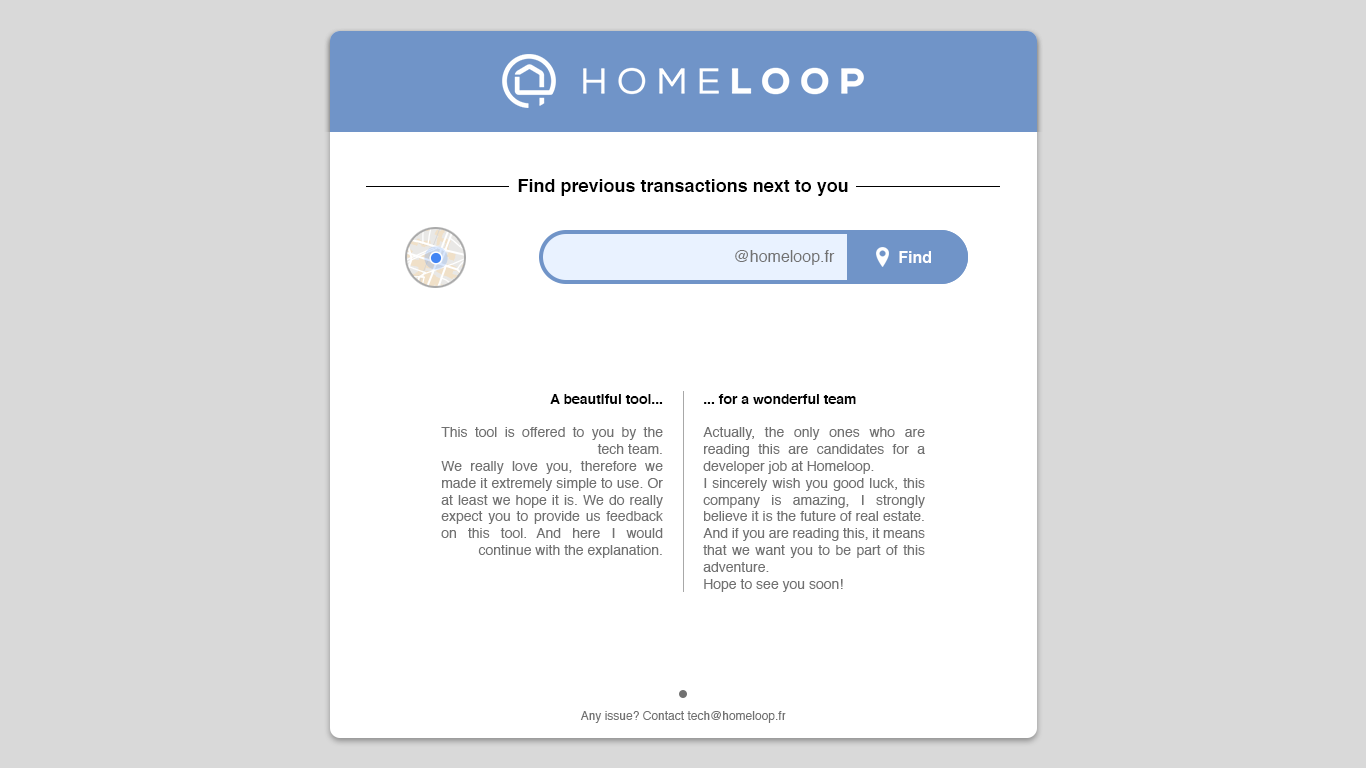
<style>
.page{position:relative;width:1366px;height:768px;background:#d9d9d9}
.page>*{position:absolute;margin:0}
.t1{font:18px "Helvetica-Bold";color:#000000}
.t2{font:16px "Helvetica";color:#717171}
.t3{font:16px "Helvetica-Bold";color:#ffffff}
.t4{font:14px "Helvetica";color:#717171}
.t5{font:14px "Helvetica-Bold";color:#000000}
.t6{font:12px "Helvetica";color:#717171}
</style>
<div class="page">
<p class="t1" style="left:518px;top:179px;width:330px;height:17px">Find previous transactions next to you</p>
<p class="t2" style="left:735px;top:250px;width:100px;height:15px">@homeloop.fr</p>
<p class="t3" style="left:899px;top:251px;width:32px;height:12px">Find</p>
<p class="t4" style="left:441px;top:394px;width:222px;height:164px;text-align:justify"><span class="t5">A beautiful tool...<br></span><br>This tool is offered to you by the tech team.<br>We really love you, therefore we made it extremely simple to use. Or at least we hope it is. We do really expect you to provide us feedback on this tool. And here I would continue with the explanation.</p>
<p class="t4" style="left:703px;top:394px;width:222px;height:198px;text-align:justify"><span class="t5">... for a wonderful team<br></span><br>Actually, the only ones who are reading this are candidates for a developer job at Homeloop.<br>I sincerely wish you good luck, this company is amazing, I strongly believe it is the future of real estate. And if you are reading this, it means that we want you to be part of this adventure.<br>Hope to see you soon!</p>
<p class="t6" style="left:580px;top:711px;width:206px;height:12px">Any issue? Contact tech@homeloop.fr</p>
</div>
